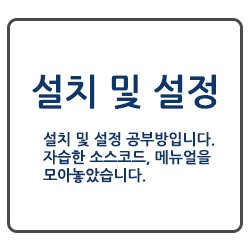
<style>
.page{position:relative;width:250px;height:250px;background:#ffffff}
.page>*{position:absolute;margin:0}
.t1{font:36px "NanumGothicBold";color:#0e3769}
.t2{font:15px "NanumGothicBold";color:#0e3769}
</style>
<div class="page">
<p class="t1" style="left:32px;top:74px;width:185px;height:35px">설치 및 설정</p>
<p class="t2" style="left:43px;top:132px;width:172px;height:51px">설치 및 설정 공부방입니다.<br>자습한 소스코드, 메뉴얼을<br>모아놓았습니다.</p>
</div>
